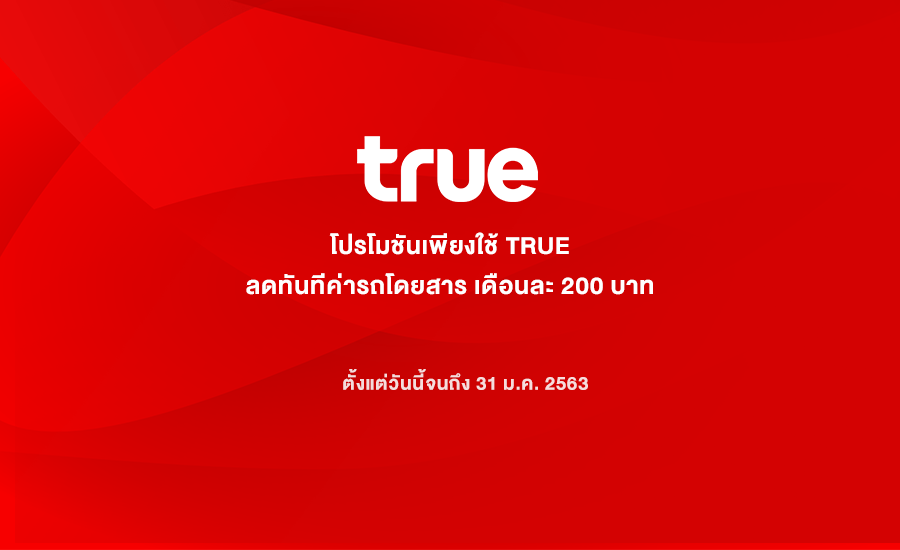
<style>
.page{position:relative;width:900px;height:550px;background:#d40202}
.page>*{position:absolute;margin:0}
.t1{font:34.3px/40px "DBHelvethaicaX-75Bd";letter-spacing:0.02em;color:#ffffff}
.t2{font:26.5px "DBHelvethaicaX-75Bd";letter-spacing:0.02em;color:#f5dddd}
</style>
<div class="page">
<p class="t1" style="left:246px;top:232px;width:407px;height:63px;text-align:center">โปรโมชันเพียงใช้ TRUE<br>ลดทันทีค่ารถโดยสาร เดือนละ 200 บาท</p>
<p class="t2" style="left:343px;top:369px;width:245px;height:21px">ตั้งแต่วันนี้จนถึง 31 ม.ค. 2563</p>
</div>
